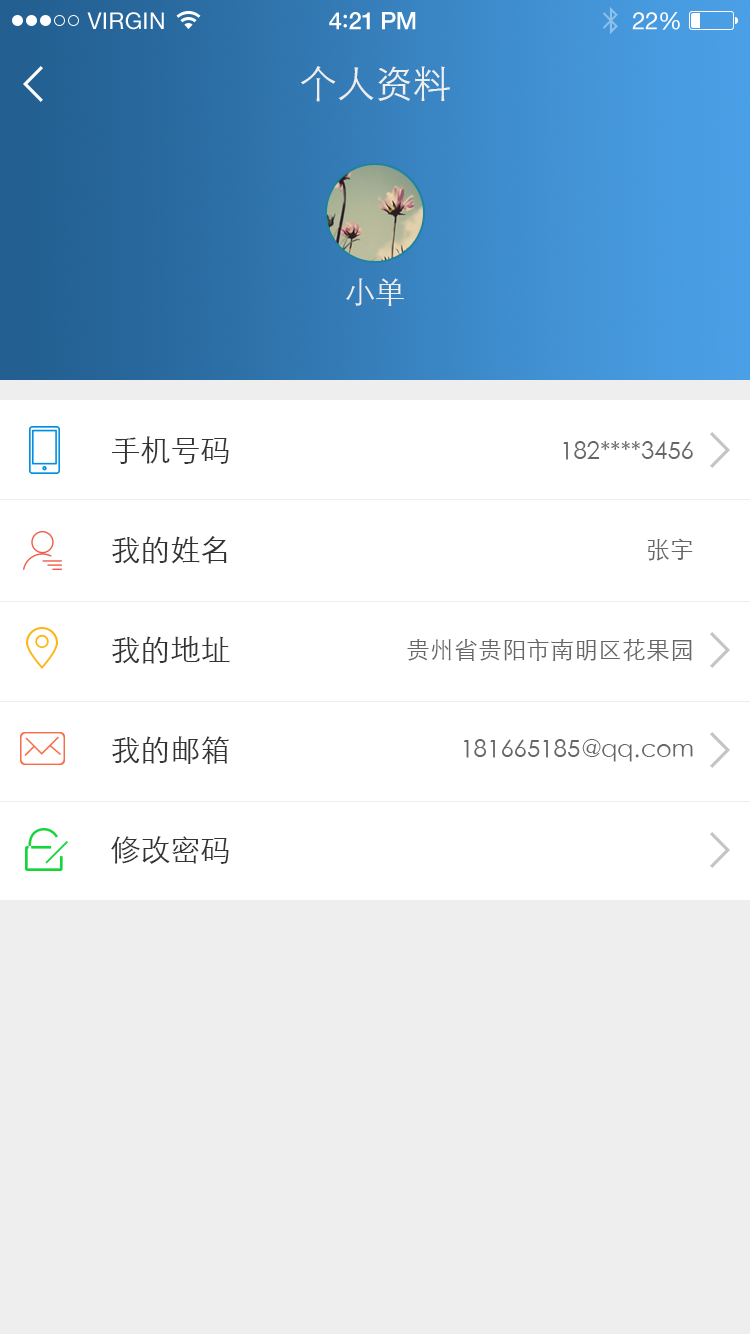
<style>
.page{position:relative;width:750px;height:1334px;background:#ffffff}
.page>*{position:absolute;margin:0}
.t1{font:23px "HelveticaNeue";letter-spacing:0.02em;color:#ffffff}
.t2{font:24px "HelveticaNeue-Medium";letter-spacing:-0.02em;color:#ffffff}
.t3{font:26px "Avenir-Medium";letter-spacing:-0.02em;color:#ffffff}
.t4{font:24px "HelveticaNeue";letter-spacing:-0.02em;color:#ffffff}
.t5{font:38px "STXihei";color:#eeeeee}
.t6{font:30px "STXihei";color:#eeeeee}
.t7{font:30px "STXihei";color:#333333}
.t8{font:24px "STXihei";color:#666666}
</style>
<div class="page">
<p class="t1" style="left:87px;top:12px;width:77px;height:18px">VIRGIN</p>
<p class="t2" style="left:329px;top:12px;width:87px;height:18px">4<span class="t3">:</span>21 PM</p>
<p class="t4" style="left:632px;top:12px;width:48px;height:18px">22%</p>
<p class="t5" style="left:301px;top:66px;width:149px;height:36px">个人资料</p>
<p class="t6" style="left:346px;top:278px;width:58px;height:28px">小单</p>
<p class="t7" style="left:112px;top:436px;width:117px;height:28px">手机号码</p>
<p class="t8" style="left:563px;top:441px;width:130px;height:19px">182****3456</p>
<p class="t7" style="left:112px;top:536px;width:115px;height:28px">我的姓名</p>
<p class="t8" style="left:647px;top:538px;width:46px;height:23px">张宇</p>
<p class="t7" style="left:112px;top:636px;width:118px;height:28px">我的地址</p>
<p class="t8" style="left:407px;top:638px;width:285px;height:23px">贵州省贵阳市南明区花果园</p>
<p class="t7" style="left:112px;top:736px;width:117px;height:28px">我的邮箱</p>
<p class="t8" style="left:464px;top:739px;width:229px;height:23px">181665185@qq.com</p>
<p class="t7" style="left:111px;top:836px;width:118px;height:28px">修改密码</p>
</div>
